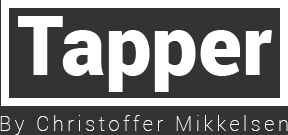
<style>
.page{position:relative;width:288px;height:135px;background:#333333}
.page>*{position:absolute;margin:0}
.t1{font:83px "Roboto-Black";color:#ffffff}
.t2{font:20px "Roboto-Thin";letter-spacing:0.18em;color:#ffffff}
</style>
<div class="page">
<p class="t1" style="left:18px;top:16px;width:254px;height:76px">Tapper</p>
<p class="t2" style="left:0px;top:115px;width:288px;height:20px">By Christoffer Mikkelsen</p>
</div>
